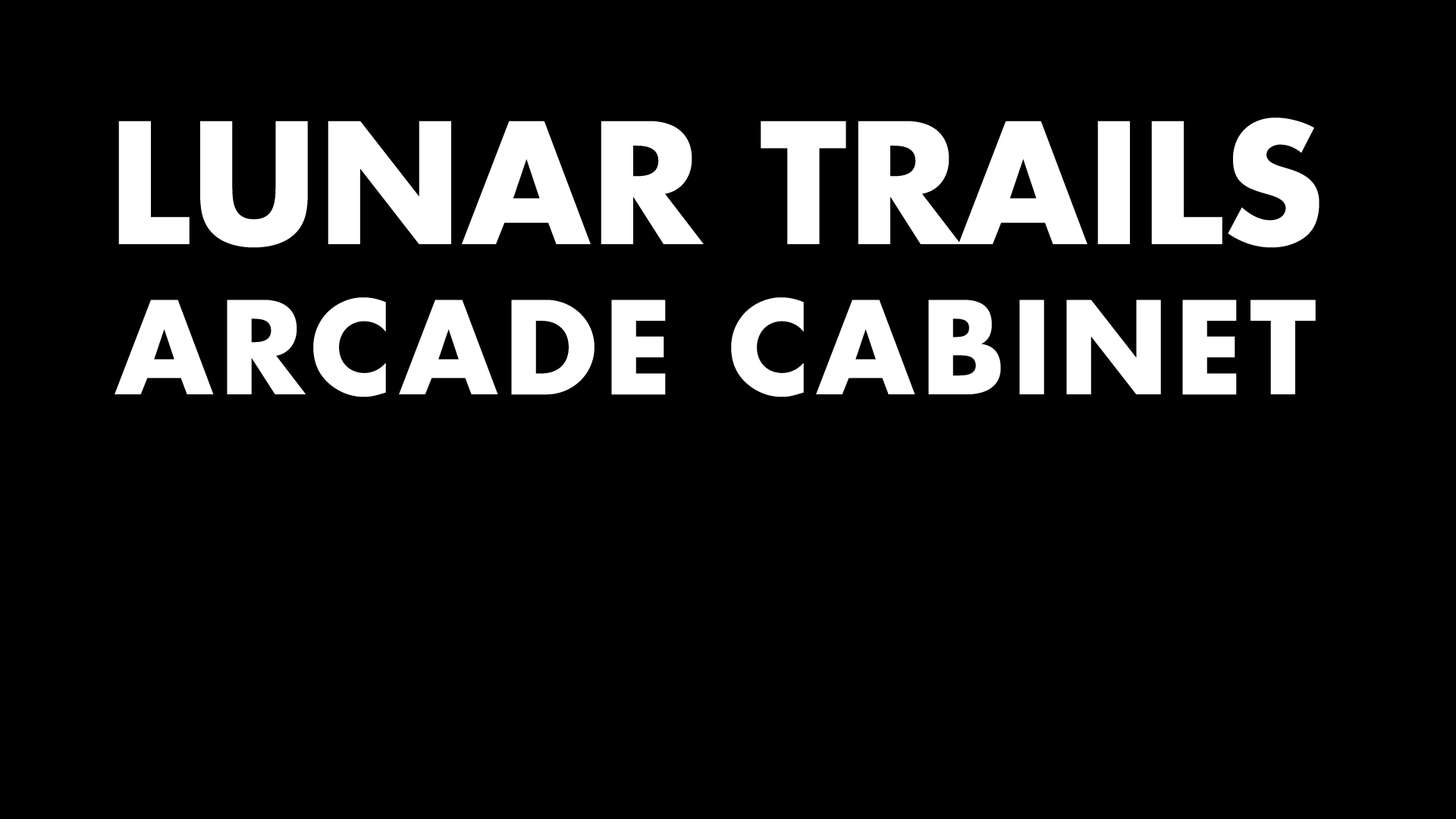
<style>
.page{position:relative;width:1456px;height:819px;background:#000000}
.page>*{position:absolute;margin:0}
.t1{font:125.1px "FuturaLTPro-Bold";letter-spacing:0.05em;color:#ffffff}
.t2{font:163.3px "FuturaLTPro-Bold";letter-spacing:0.005em;color:#ffffff}
</style>
<div class="page">
<p class="t1" style="left:115px;top:118px;width:1204px;height:279px;text-align:center"><span class="t2">LUNAR TRAILS<br></span>ARCADE CABINET</p>
</div>
